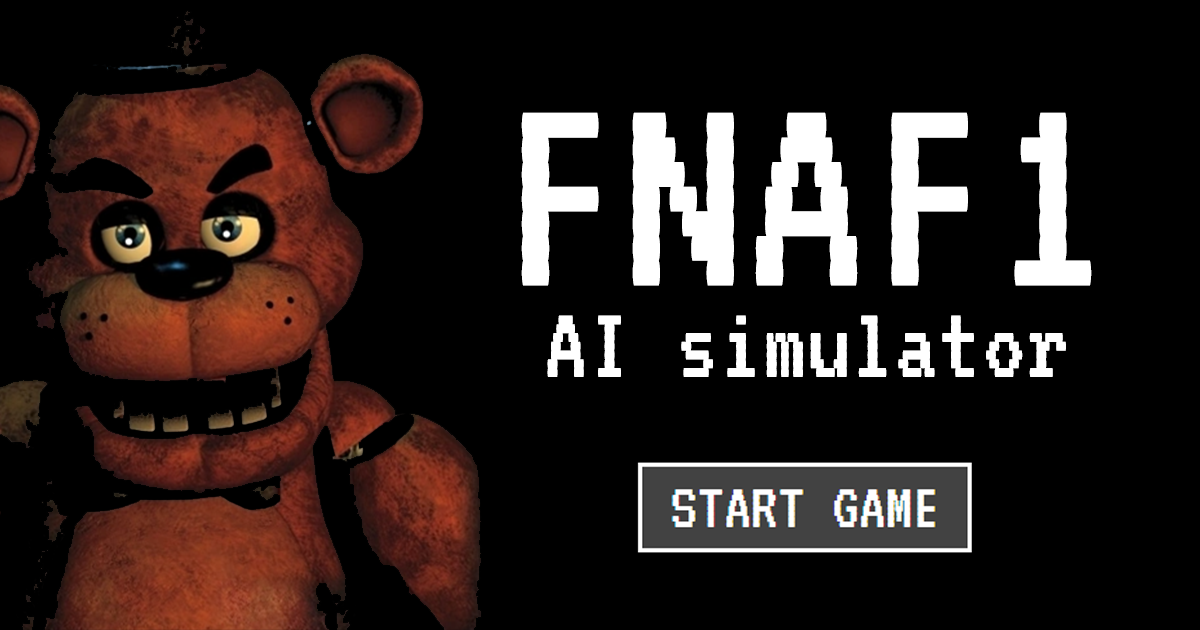
<style>
.page{position:relative;width:1200px;height:630px;background:#000000}
.page>*{position:absolute;margin:0}
.t1{font:307.8px "VT323-Regular";color:#ffffff}
.t2{font:109.5px "VT323-Regular";color:#ffffff}
</style>
<div class="page">
<p class="t1" style="left:521px;top:112px;width:571px;height:174px">FNAF1</p>
<p class="t2" style="left:547px;top:315px;width:519px;height:62px">AI simulator</p>
</div>
